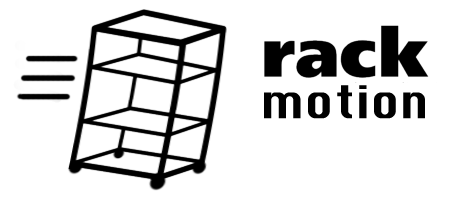
<style>
.page{position:relative;width:450px;height:200px;background:#ffffff}
.page>*{position:absolute;margin:0}
.t1{font:44px "Krungthep";color:#000000}
</style>
<div class="page">
<p class="t1" style="left:264px;top:85px;width:161px;height:34px">motion</p>
</div>
